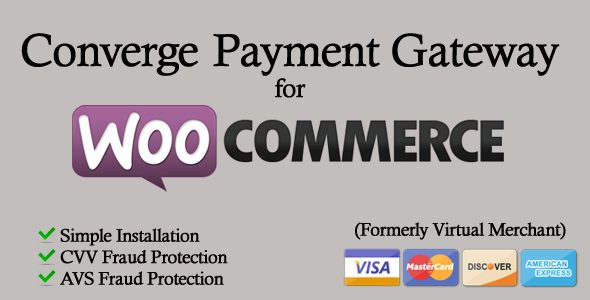
<style>
.page{position:relative;width:590px;height:300px;background:#c1bebb}
.page>*{position:absolute;margin:0}
.t1{font:45.8px "CalistoMT";letter-spacing:-0.04em;color:#000000;font-weight:bold}
.t2{font:25.9px "CalistoMT";letter-spacing:-0.04em;color:#000000;font-weight:bold}
.t3{font:17.9px "CalistoMT";letter-spacing:-0.04em;color:#000000;font-weight:bold}
</style>
<div class="page">
<p class="t1" style="left:21px;top:33px;width:539px;height:65px;text-align:center">Converge Payment Gateway<br><span class="t2">for</span></p>
<p class="t3" style="left:355px;top:222px;width:211px;height:18px">(Formerly Virtual Merchant)</p>
<p class="t3" style="left:60px;top:228px;width:168px;height:57px">Simple Installation<br>CVV Fraud Protection<br>AVS Fraud Protection</p>
</div>
